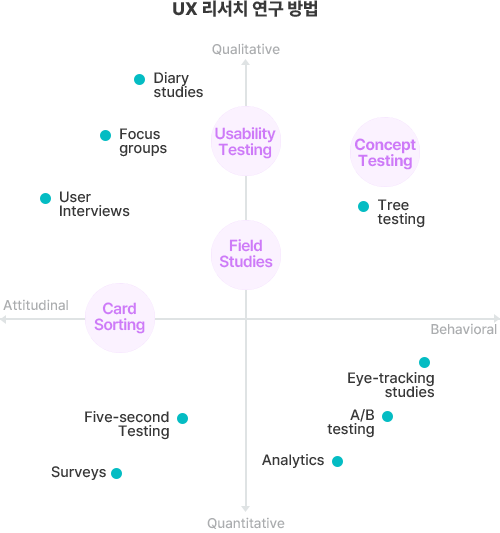
<style>
.page{position:relative;width:500px;height:533px;background:#ffffff}
.page>*{position:absolute;margin:0}
.t1{font:18px "Pretendard-ExtraBold";color:#393939;text-transform:uppercase}
.t2{font:14px "Pretendard-Medium";color:#abadaf}
.t3{font:15px/14px "Pretendard-Medium";color:#373737}
.t4{font:16px/16px "Pretendard-SemiBold";letter-spacing:-0.025em;color:#ce7af8}
.t5{font:16px/16px "Pretendard-Bold";letter-spacing:-0.025em;color:#ce7af8}
.t6{font:15px "Pretendard-Medium";color:#373737}
</style>
<div class="page">
<p class="t1" style="left:173px;top:0px;width:144px;height:17px">UX 리서치 연구 방법</p>
<p class="t2" style="left:212px;top:43px;width:68px;height:12px">Qualitative</p>
<p class="t3" style="left:154px;top:72px;width:49px;height:26px">Diary <br>studies</p>
<p class="t3" style="left:119px;top:128px;width:48px;height:29px">Focus <br>groups</p>
<p class="t4" style="left:215px;top:127px;width:61px;height:32px;text-align:center">Usability<br>Testing</p>
<p class="t5" style="left:355px;top:138px;width:61px;height:32px;text-align:center">Concept<br>Testing</p>
<p class="t3" style="left:60px;top:191px;width:70px;height:26px">User<br>Interviews</p>
<p class="t3" style="left:377px;top:199px;width:48px;height:29px">Tree<br>testing</p>
<p class="t4" style="left:219px;top:239px;width:54px;height:29px;text-align:center">Field<br>Studies</p>
<p class="t2" style="left:3px;top:299px;width:65px;height:12px">Attitudinal</p>
<p class="t4" style="left:94px;top:302px;width:51px;height:32px;text-align:center">Card<br>Sorting</p>
<p class="t2" style="left:431px;top:323px;width:66px;height:12px">Behavioral</p>
<p class="t3" style="left:348px;top:372px;width:86px;height:26px;text-align:right">Eye-tracking<br>studies</p>
<p class="t3" style="left:85px;top:411px;width:84px;height:29px;text-align:right">Five-second<br>Testing</p>
<p class="t3" style="left:327px;top:409px;width:47px;height:29px;text-align:right">A/B<br>testing</p>
<p class="t6" style="left:262px;top:454px;width:62px;height:14px">Analytics</p>
<p class="t6" style="left:51px;top:466px;width:55px;height:14px">Surveys</p>
<p class="t2" style="left:207px;top:517px;width:78px;height:12px">Quantitative</p>
</div>
